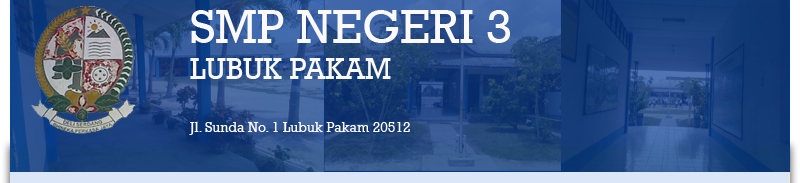
<style>
.page{position:relative;width:800px;height:183px}
.page>*{position:absolute;margin:0}
.t1{font:14px "Rockwell";color:#fbf9f9}
.t2{font:48px "Rockwell";color:#fbf9f9}
.t3{font:30px "Rockwell";color:#fbf9f9}
</style>
<div class="page">
<p class="t1" style="left:189px;top:10px;width:321px;height:125px"><span class="t2">SMP NEGERI 3</span><span class="t3"> <br>LUBUK PAKAM<br><br></span>Jl. Sunda No. 1 Lubuk Pakam 20512</p>
</div>
